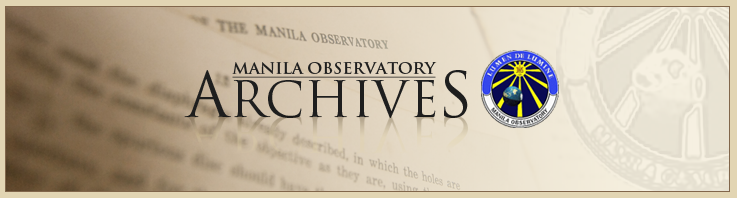
<style>
.page{position:relative;width:737px;height:198px}
.page>*{position:absolute;margin:0}
.t1{font:15.8px "TrajanPro-Bold";color:#1e1e1e;text-decoration:underline}
.t2{font:48.6px "TrajanPro-Regular";color:#1e1e1e}
.t3{font:60.7px "TrajanPro-Regular";color:#1e1e1e}
</style>
<div class="page">
<p class="t1" style="left:232px;top:62px;width:205px;height:16px">MANILA OBSERVATORY</p>
<p class="t2" style="left:184px;top:70px;width:284px;height:48px"><span class="t3">A</span>RCHIVE<span class="t3">S</span></p>
</div>
